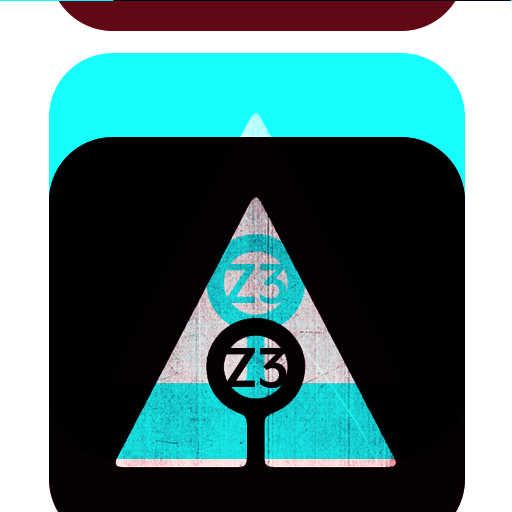
<style>
.page{position:relative;width:512px;height:512px;background:#010102}
.page>*{position:absolute;margin:0}
.t1{font:65px "MrEavesModOT-Bold"}
</style>
<div class="page">
<p class="t1" style="left:226px;top:263px;width:61px;height:40px">Z3</p>
</div>
